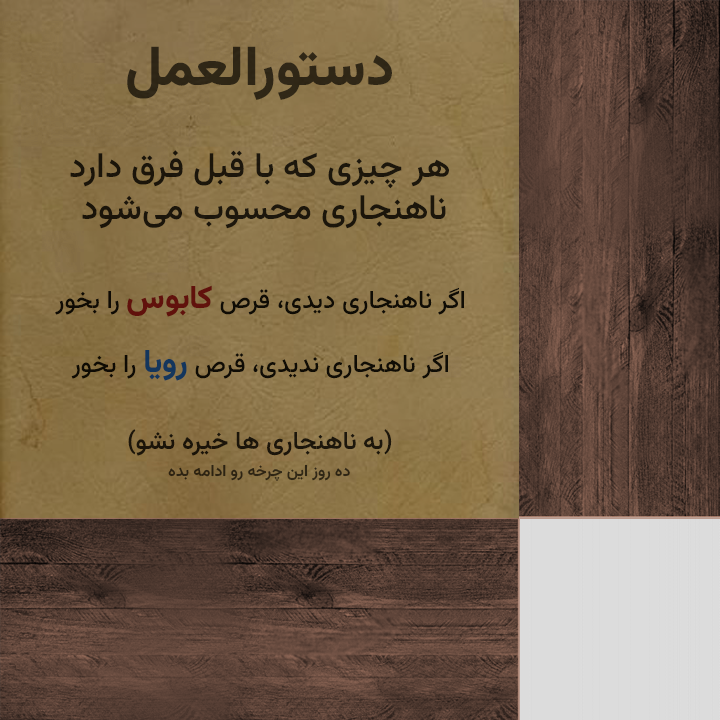
<style>
.page{position:relative;width:720px;height:720px}
.page>*{position:absolute;margin:0}
.t1{font:56px "Vazirmatn-ExtraBold";color:#2f2616}
.t2{font:35px "Vazirmatn-Medium";color:#1c160b}
.t3{font:25px "Vazirmatn-Medium"}
.t4{font:32px "Vazirmatn-ExtraBold"}
.t5{font:25px "Vazirmatn-Medium";color:#000000}
.t6{font:32px "Vazirmatn-ExtraBold";color:#124f8b}
.t7{font:25px "Vazirmatn-SemiBold";color:#1c150b}
.t8{font:16px "Vazirmatn-SemiBold";color:#2e2514}
</style>
<div class="page">
<p class="t1" style="left:127px;top:46px;width:265px;height:54px">دستورالعمل</p>
<p class="t2" style="left:70px;top:150px;width:379px;height:79px;text-align:center">هر چیزی که با قبل فرق دارد<br> ناهنجاری محسوب می‌شود</p>
<p class="t3" style="left:55px;top:285px;width:409px;height:32px">اگر ناهنجاری دیدی، قرص <span class="t4">کابوس</span> را بخور</p>
<p class="t5" style="left:71px;top:350px;width:377px;height:31px;opacity:0.95">اگر ناهنجاری ندیدی، قرص <span class="t6">رویا</span> را بخور</p>
<p class="t7" style="left:128px;top:429px;width:264px;height:27px">(به ناهنجاری ها خیره نشو)</p>
<p class="t8" style="left:168px;top:464px;width:182px;height:17px">ده روز این چرخه رو ادامه بده</p>
</div>
